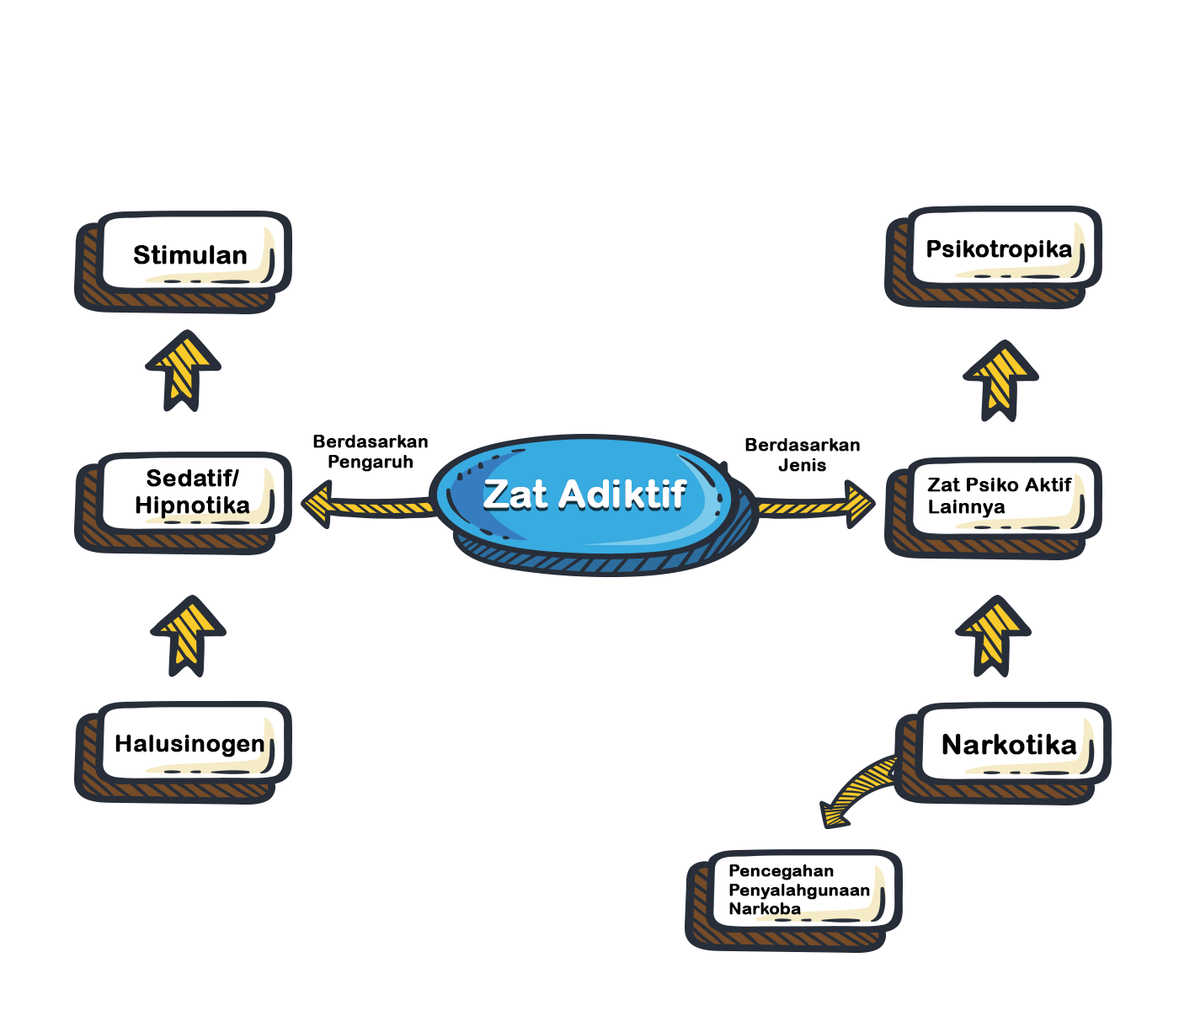
<style>
.page{position:relative;width:1179px;height:1011px;background:#ffffff}
.page>*{position:absolute;margin:0}
.t1{font:25.9px "ArialRoundedMTBold";color:#000000;font-weight:bold}
.t2{font:23.2px "ArialRoundedMTBold";color:#000000;font-weight:bold}
.t3{font:17.8px/19.9px "ArialRoundedMTBold";color:#000000;font-weight:bold}
.t4{font:23.9px/26.8px "ArialRoundedMTBold";color:#000000;font-weight:bold}
.t5{font:38.5px "ArialRoundedMTBold";color:#fffefe;font-weight:bold}
.t6{font:19.6px/21.9px "ArialRoundedMTBold";color:#000000;font-weight:bold}
.t7{font:23.9px "ArialRoundedMTBold";color:#000000;font-weight:bold}
.t8{font:27.8px "ArialRoundedMTBold";color:#000000;font-weight:bold}
.t9{font:16.9px/18.9px "ArialRoundedMTBold";color:#000000;font-weight:bold}
</style>
<div class="page">
<p class="t1" style="left:134px;top:245px;width:113px;height:20px">Stimulan</p>
<p class="t2" style="left:928px;top:240px;width:144px;height:23px">Psikotropika</p>
<p class="t3" style="left:313px;top:435px;width:115px;height:37px;text-align:center">Berdasarkan<br>Pengaruh</p>
<p class="t3" style="left:746px;top:438px;width:114px;height:34px;text-align:center">Berdasarkan<br>Jenis</p>
<p class="t4" style="left:136px;top:469px;width:114px;height:50px;text-align:center">Sedatif/<br>Hipnotika</p>
<p class="t5" style="left:484px;top:479px;width:203px;height:29px">Zat Adiktif</p>
<p class="t6" style="left:928px;top:478px;width:145px;height:40px">Zat Psiko Aktif<br>Lainnya</p>
<p class="t7" style="left:115px;top:735px;width:150px;height:22px">Halusinogen</p>
<p class="t8" style="left:943px;top:734px;width:135px;height:21px">Narkotika</p>
<p class="t9" style="left:730px;top:864px;width:140px;height:51px">Pencegahan <br>Penyalahgunaan<br>Narkoba</p>
</div>
